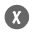
<style>
.page{position:relative;width:34px;height:34px;background:#ffffff}
.page>*{position:absolute;margin:0}
.t1{font:21.6px "MarkerFelt-Thin";color:#ffffff}
</style>
<div class="page">
<p class="t1" style="left:12px;top:11px;width:10px;height:13px">x</p>
</div>
